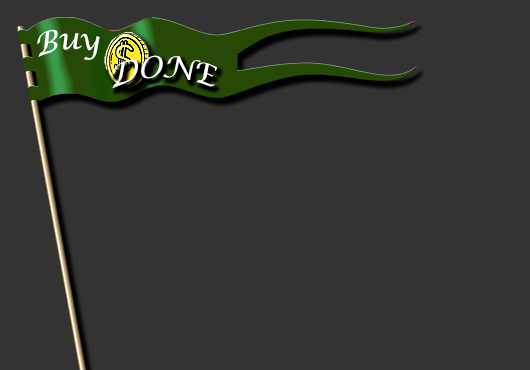
<style>
.page{position:relative;width:530px;height:370px;background:#333333}
.page>*{position:absolute;margin:0}
.t1{font:30px "LucidaCalligraphy-Italic";color:#ffffff}
</style>
<div class="page">
<p class="t1" style="left:37px;top:29px;width:63px;height:31px;rotate:-5deg">Buy</p>
<p class="t1" style="left:112px;top:55px;width:106px;height:34px">DONE</p>
</div>
